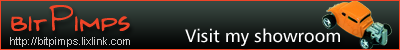
<style>
.page{position:relative;width:400px;height:50px}
.page>*{position:absolute;margin:0}
.t1{font:38px "Kilroy-WasHere";color:#ef4427}
.t2{font:18px "Humanist777BT-RomanB";color:#ffffff}
.t3{font:11px "ArialMT";color:#c7c7c7}
</style>
<div class="page">
<p class="t1" style="left:11px;top:5px;width:119px;height:27px">bitPimps</p>
<p class="t2" style="left:185px;top:28px;width:155px;height:18px">Visit my showroom</p>
<p class="t3" style="left:10px;top:37px;width:120px;height:10px">http://bitpimps.lixlink.com</p>
</div>
